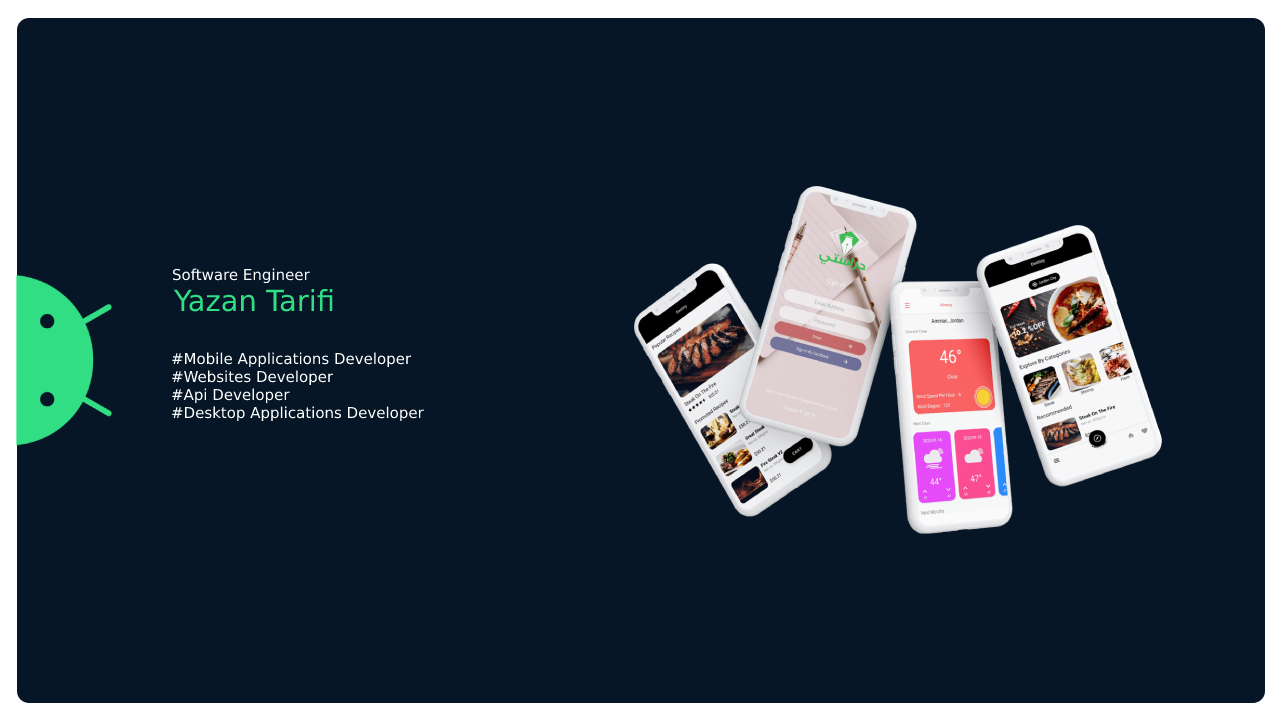
<style>
.page{position:relative;width:1280px;height:720px;background:#061626}
.page>*{position:absolute;margin:0}
.t1{font:15px "DejaVuSans";color:#ffffff}
.t2{font:29px "DejaVuSans";color:#32de84}
</style>
<div class="page">
<p class="t1" style="left:172px;top:268px;width:138px;height:16px">Software Engineer</p>
<p class="t2" style="left:173px;top:288px;width:160px;height:24px">Yazan Tarifi</p>
<p class="t1" style="left:172px;top:352px;width:252px;height:70px">#Mobile Applications Developer<br>#Websites Developer<br>#Api Developer<br>#Desktop Applications Developer</p>
</div>
